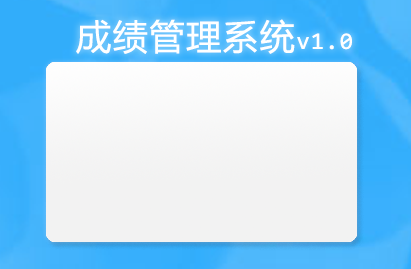
<style>
.page{position:relative;width:411px;height:269px}
.page>*{position:absolute;margin:0}
.t1{font:35px "YaHei-Consolas-Hybrid";letter-spacing:0.05em;color:#ffffff}
.t2{font:24px "YaHei-Consolas-Hybrid";letter-spacing:0.05em;color:#ffffff}
</style>
<div class="page">
<p class="t1" style="left:76px;top:19px;width:276px;height:35px">成绩管理系统<span class="t2">v1.0</span></p>
</div>
